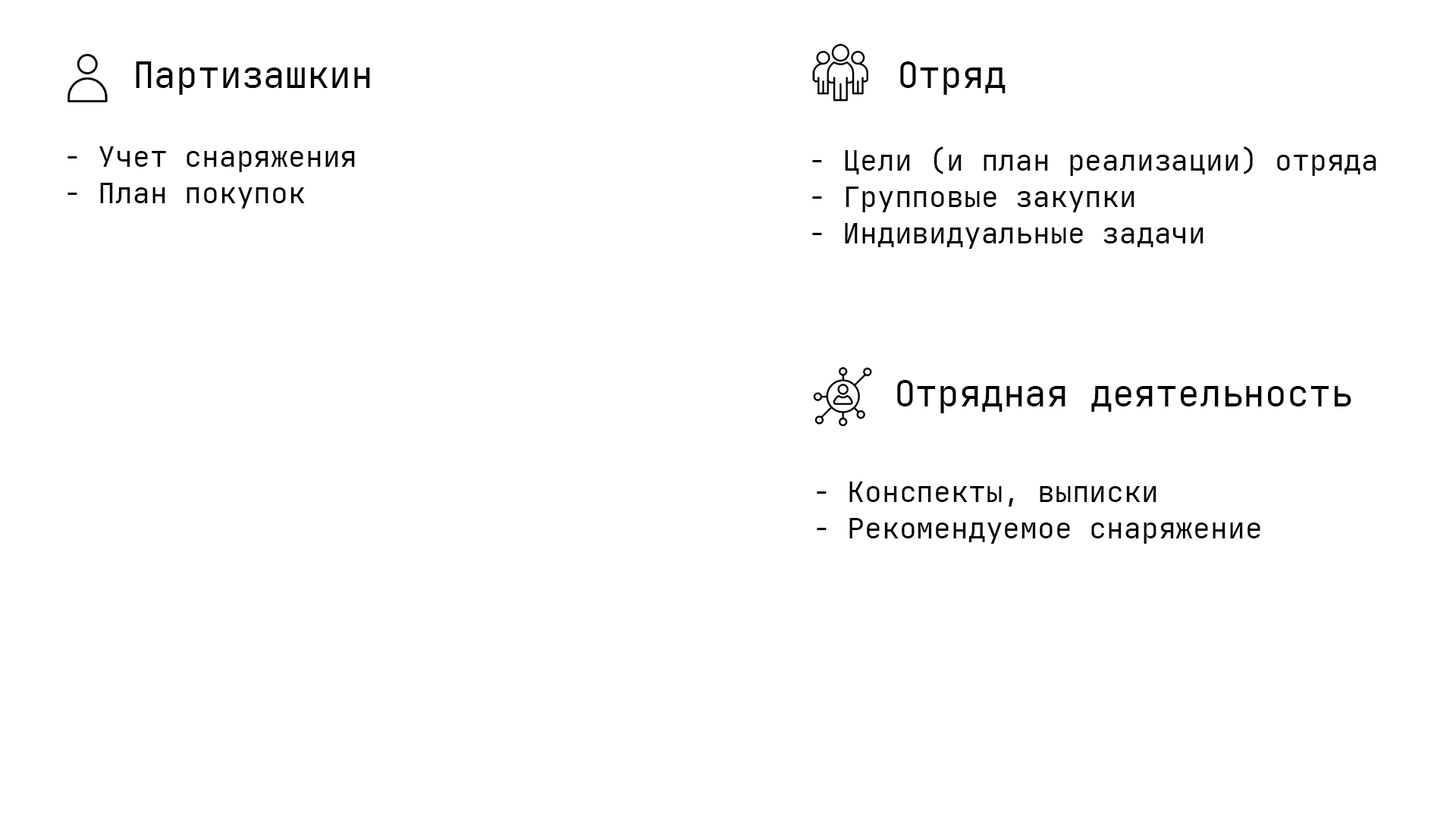
<style>
.page{position:relative;width:1456px;height:819px;background:#ffffff}
.page>*{position:absolute;margin:0}
.t1{font:36.4px "JetBrainsMono-Regular";color:#000000}
.t2{font:28.8px/36.4px "JetBrainsMono-Regular";color:#000000}
</style>
<div class="page">
<p class="t1" style="left:136px;top:61px;width:234px;height:34px">Партизашкин</p>
<p class="t1" style="left:900px;top:61px;width:106px;height:34px">Отряд</p>
<p class="t2" style="left:67px;top:146px;width:288px;height:63px">- Учет снаряжения<br>- План покупок</p>
<p class="t2" style="left:812px;top:146px;width:564px;height:103px">- Цели (и план реализации) отряда<br>- Групповые закупки<br>- Индивидуальные задачи</p>
<p class="t1" style="left:897px;top:380px;width:454px;height:33px">Отрядная деятельность</p>
<p class="t2" style="left:817px;top:482px;width:443px;height:62px">- Конспекты, выписки<br>- Рекомендуемое снаряжение</p>
</div>
